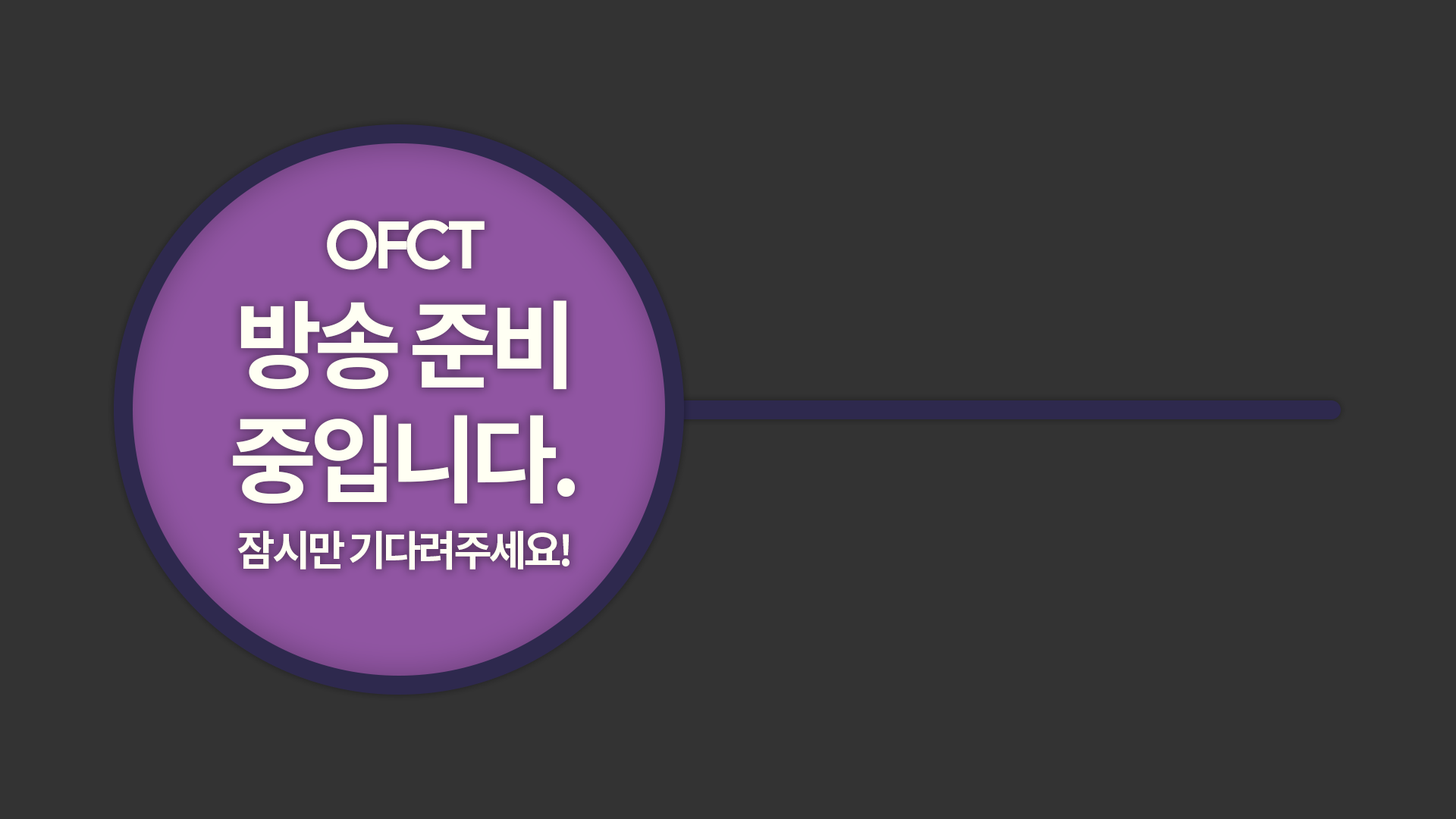
<style>
.page{position:relative;width:1456px;height:819px;background:#333333}
.page>*{position:absolute;margin:0}
.t1{font:41.7px/70.5px "NotoSansCJKkr-Bold";letter-spacing:-0.08em;color:#fffff3}
.t2{font:66px "ProductSans-Bold";letter-spacing:-0.08em;color:#fffff3}
.t3{font:95.5px/112.2px "NotoSansCJKkr-Bold";letter-spacing:-0.08em;color:#fffff3}
.t4{font:95.5px "NotoSansCJKkr-Bold";letter-spacing:-0.08em;color:#fffff3}
</style>
<div class="page">
<p class="t1" style="left:233px;top:220px;width:342px;height:350px;text-align:center"><span class="t2">OFCT<br></span><span class="t3">방송 준비<br></span><span class="t4">중입니다.<br></span>잠시만 기다려주세요!</p>
</div>
